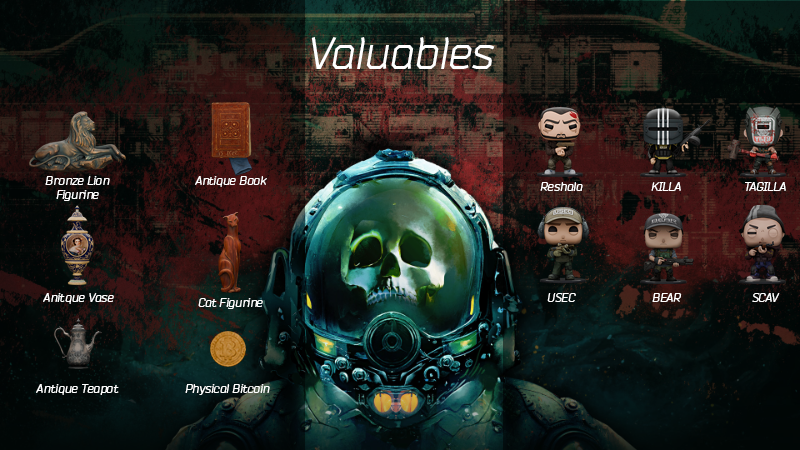
<style>
.page{position:relative;width:800px;height:450px}
.page>*{position:absolute;margin:0}
.t1{font:44.6px "Bender-Italic";color:#ffffff}
.t2{font:12px "Bender-Italic";color:#ffffff}
</style>
<div class="page">
<p class="t1" style="left:311px;top:37px;width:184px;height:32px">Valuables</p>
<p class="t2" style="left:45px;top:176px;width:65px;height:25px;text-align:center">Bronze Lion<br>Figurine</p>
<p class="t2" style="left:195px;top:176px;width:72px;height:11px">Antique Book</p>
<p class="t2" style="left:540px;top:182px;width:43px;height:9px">Reshala</p>
<p class="t2" style="left:651px;top:182px;width:30px;height:9px">KILLA</p>
<p class="t2" style="left:745px;top:182px;width:41px;height:9px">TAGILLA</p>
<p class="t2" style="left:43px;top:293px;width:71px;height:11px">Anitque Vase</p>
<p class="t2" style="left:547px;top:293px;width:29px;height:9px">USEC</p>
<p class="t2" style="left:652px;top:293px;width:30px;height:9px">BEAR</p>
<p class="t2" style="left:752px;top:293px;width:28px;height:9px">SCAV</p>
<p class="t2" style="left:198px;top:298px;width:65px;height:11px">Cat Figurine</p>
<p class="t2" style="left:36px;top:384px;width:83px;height:11px">Antique Teapot</p>
<p class="t2" style="left:185px;top:384px;width:85px;height:11px">Physical Bitcoin</p>
</div>
